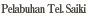
<style>
.page{position:relative;width:88px;height:18px;background:#ffffff}
.page>*{position:absolute;margin:0}
.t1{font:12px "RyuminPro-ExBold";letter-spacing:-0.08em;color:#4c4843;scale:0.85 1}
</style>
<div class="page">
<p class="t1" style="left:1px;top:4px;width:86px;height:9px">Pelabuhan Tel. Saiki</p>
</div>
